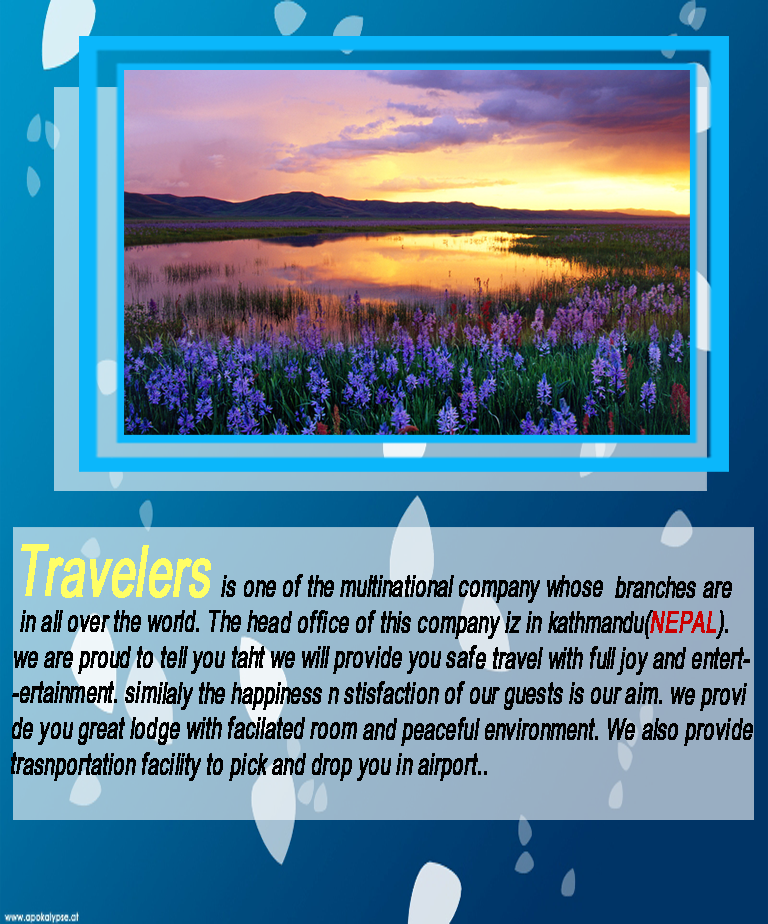
<style>
.page{position:relative;width:768px;height:924px}
.page>*{position:absolute;margin:0}
.t1{font:29.7px "ArialMT";color:#000000;font-weight:bold;font-style:italic;scale:0.62 1}
.t2{font:70.9px "ArialMT";color:#ffff66;font-weight:bold;font-style:italic;scale:0.62 1}
.t3{font:29.7px "ArialMT";color:#cc0000;font-weight:bold;font-style:italic;scale:0.62 1}
</style>
<div class="page">
<p class="t1" style="left:11px;top:544px;width:742px;height:237px"><span class="t2">Travelers </span>is one of the multinational company whose  branches are<br> in all over the world. The head office of this company iz in kathmandu(<span class="t3">NEPAL</span>).<br>we are proud to tell you taht we will provide you safe travel with full joy and entert-<br>-ertainment. similaly the happiness n stisfaction of our guests is our aim. we provi<br>de you great lodge with facilated room and peaceful environment. We also provide <br>trasnportation facility to pick and drop you in airport..</p>
</div>
